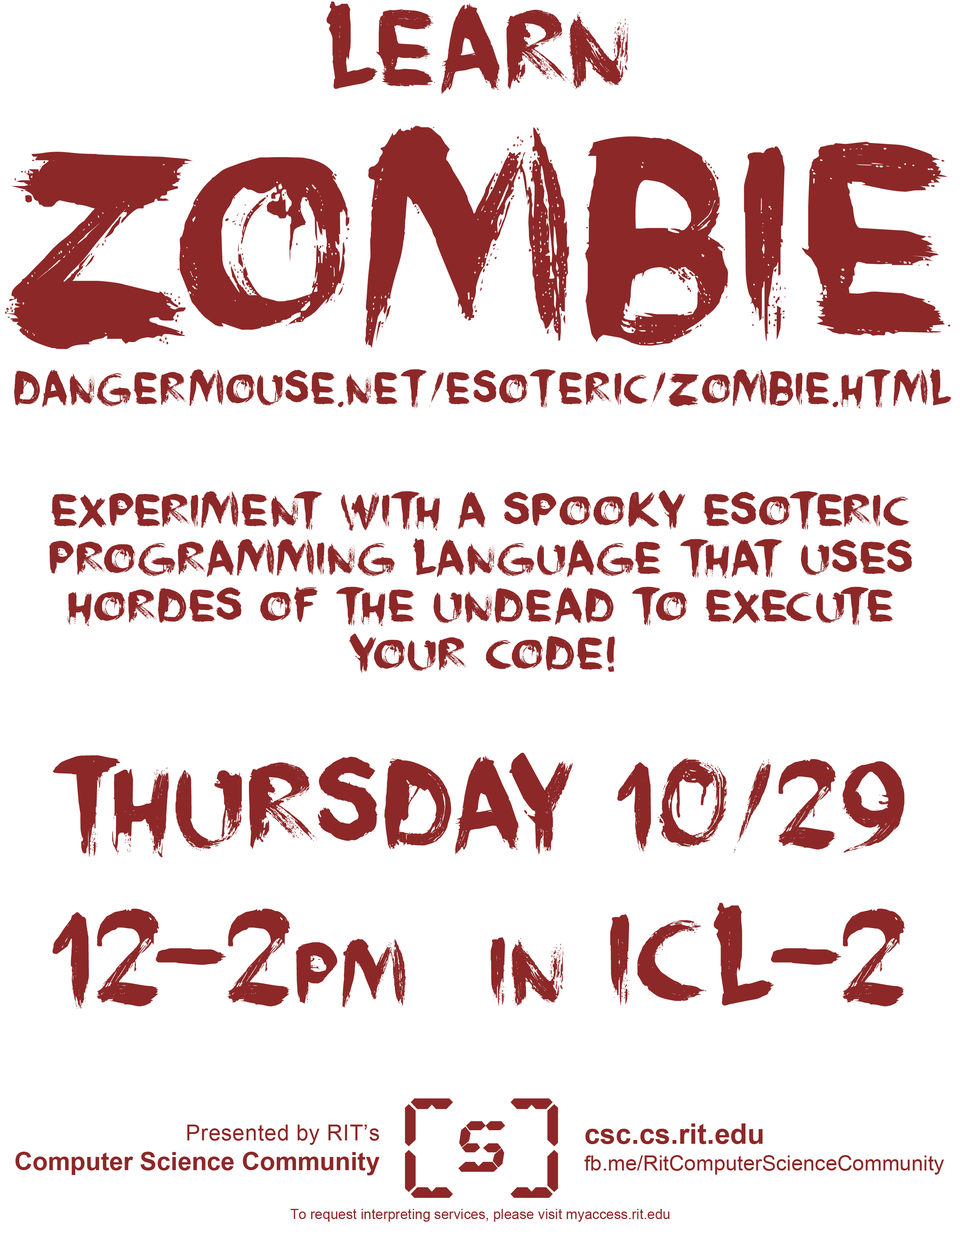
<style>
.page{position:relative;width:960px;height:1242px;background:#ffffff}
.page>*{position:absolute;margin:0}
.t1{font:107px/255.1px "DKFaceYourFearsII";color:#8d2828}
.t2{font:269.4px/255.1px "DKFaceYourFearsII";color:#8d2828}
.t3{font:269.4px/127.3px "DKFaceYourFearsII";color:#8d2828}
.t4{font:269.4px/111.7px "DKFaceYourFearsII";color:#8d2828}
.t5{font:44.7px "DKFaceYourFearsII";color:#8d2828}
.t6{font:44.9px/47.9px "DKFaceYourFearsII";color:#8d2828;scale:1.09 1}
.t7{font:116.4px/157.1px "DKFaceYourFearsII";color:#8d2828}
.t8{font:125.8px/157.1px "DKFaceYourFearsII";color:#8d2828}
.t9{font:83.5px/157.1px "DKFaceYourFearsII";color:#8d2828}
.t10{font:94.5px/157.1px "DKFaceYourFearsII";color:#8d2828}
.t11{font:25.1px/29.8px "Arial-BoldMT";color:#8d2828}
.t12{font:22px/29.8px "ArialMT";letter-spacing:0.02em;color:#8d2828}
.t13{font:21.2px/26.7px "ArialMT";color:#8d2828}
.t14{font:28.2px/26.7px "Arial-BoldMT";color:#8d2828}
.t15{font:13.9px "ArialMT";color:#8d2828}
</style>
<div class="page">
<p class="t1" style="left:5px;top:2px;width:945px;height:347px;text-align:center">Learn<br><span class="t2">ZOMB</span><span class="t3">I</span><span class="t4">E</span></p>
<p class="t5" style="left:14px;top:369px;width:938px;height:40px">dangermouse.net/esoteric/zombie.html</p>
<p class="t6" style="left:49px;top:490px;width:863px;height:183px;text-align:center">experiment with a spooky esoteric programming language That Uses hordes of the undead to execute your code!</p>
<p class="t7" style="left:52px;top:752px;width:853px;height:257px;text-align:center">Thursday 10/29<br><span class="t8">12-2</span><span class="t9">pm   </span><span class="t10">in</span><span class="t8"> icl-2</span></p>
<p class="t11" style="left:15px;top:1125px;width:365px;height:51px;text-align:right"><span class="t12">Presented by RIT’s<br></span>Computer Science Community</p>
<p class="t13" style="left:584px;top:1124px;width:360px;height:51px"><span class="t14">csc.cs.rit.edu<br></span>fb.me/RitComputerScienceCommunity</p>
<p class="t15" style="left:290px;top:1209px;width:379px;height:13px">To request interpreting services, please visit myaccess.rit.edu</p>
</div>
